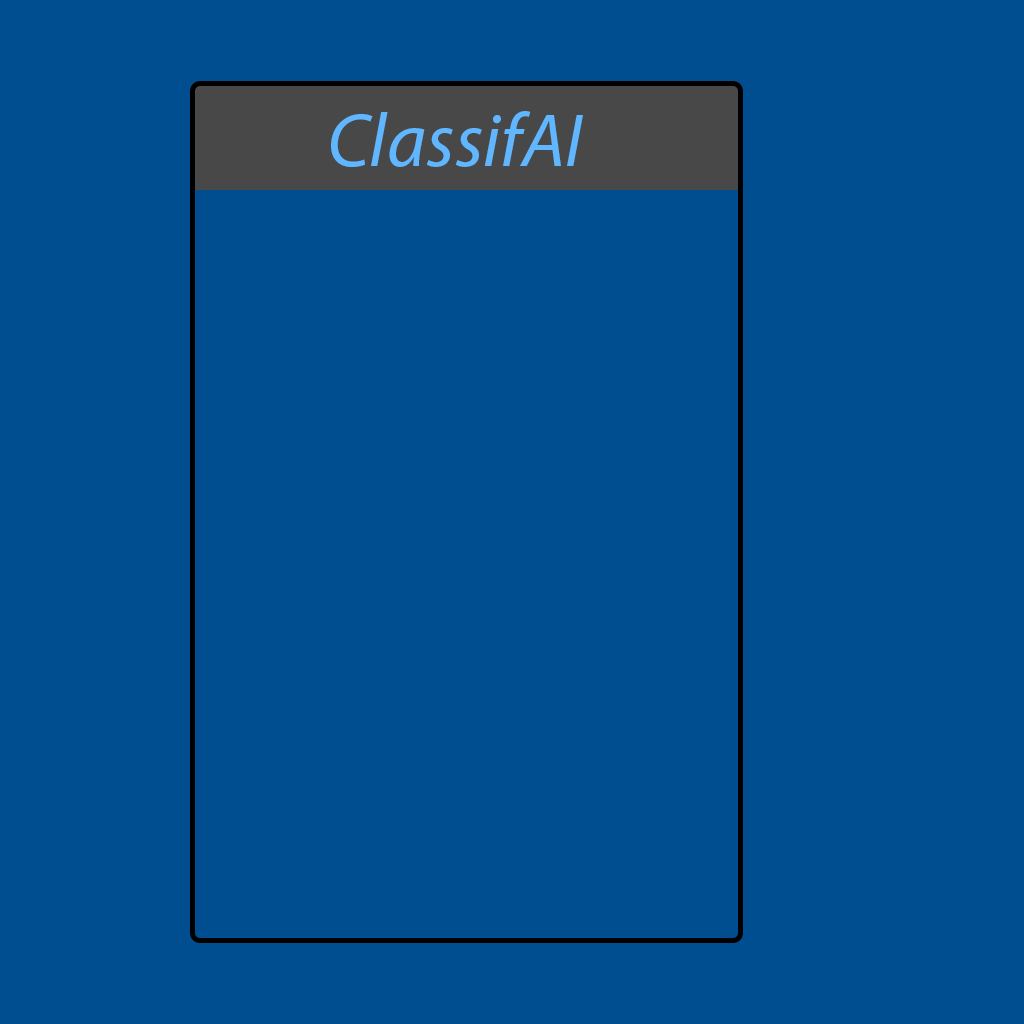
<style>
.page{position:relative;width:1024px;height:1024px;background:#004e90}
.page>*{position:absolute;margin:0}
.t1{font:76px "MyriadPro-It";color:#60b7ff}
</style>
<div class="page">
<p class="t1" style="left:331px;top:111px;width:252px;height:56px">ClassifAI</p>
</div>
